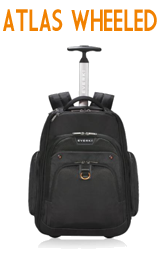
<style>
.page{position:relative;width:159px;height:255px;background:#ffffff}
.page>*{position:absolute;margin:0}
.t1{font:30px "MarketDeco";letter-spacing:-0.05em;color:#f18100;text-transform:uppercase;scale:0.83 1}
</style>
<div class="page">
<p class="t1" style="left:3px;top:9px;width:154px;height:22px">Atlas Wheeled</p>
</div>
